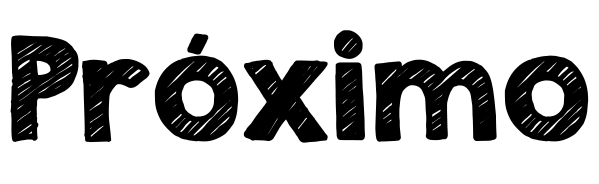
<style>
.page{position:relative;width:599px;height:184px;background:#ffffff}
.page>*{position:absolute;margin:0}
.t1{font:125px "KGSecondChancesSketch";color:#000000;font-weight:bold}
</style>
<div class="page">
<p class="t1" style="left:10px;top:30px;width:579px;height:113px">Próximo</p>
</div>
